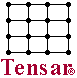
<style>
.page{position:relative;width:77px;height:78px;background:#ffffff}
.page>*{position:absolute;margin:0}
.t1{font:24px "TimesNewRomanPS-BoldMT";color:#a40231}
</style>
<div class="page">
<p class="t1" style="left:1px;top:59px;width:71px;height:16px">Tensar</p>
</div>
